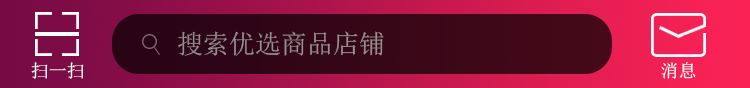
<style>
.page{position:relative;width:750px;height:88px}
.page>*{position:absolute;margin:0}
.t1{font:26px "SimSun";color:#998e92}
.t2{font:18px "SimSun";color:#ffffff}
</style>
<div class="page">
<p class="t1" style="left:178px;top:31px;width:206px;height:25px">搜索优选商品店铺</p>
<p class="t2" style="left:31px;top:62px;width:53px;height:17px">扫一扫</p>
<p class="t2" style="left:661px;top:62px;width:35px;height:17px">消息</p>
</div>
